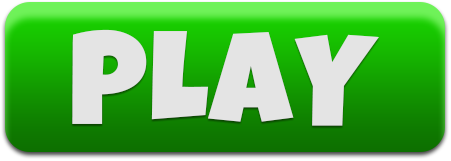
<style>
.page{position:relative;width:451px;height:161px;background:#e4e4e4}
.page>*{position:absolute;margin:0}
.t1{font:130px "LuckiestGuy-Regular";color:#e4e4e4;text-transform:uppercase}
</style>
<div class="page">
<p class="t1" style="left:72px;top:29px;width:307px;height:97px">PLAY</p>
</div>
